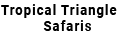
<style>
.page{position:relative;width:118px;height:36px;background:#ffffff}
.page>*{position:absolute;margin:0}
.t1{font:13.5px "Roboto-Bold";letter-spacing:0.08em;color:#000000;scale:0.97 1}
</style>
<div class="page">
<p class="t1" style="left:1px;top:4px;width:116px;height:27px;text-align:center">Tropical Triangle<br>    Safaris</p>
</div>
